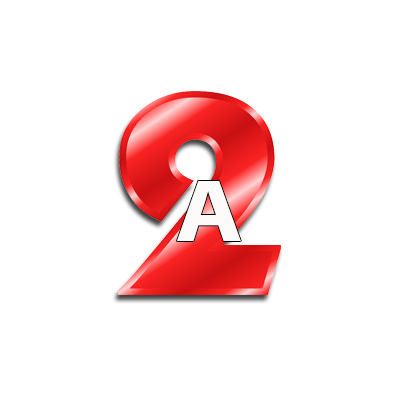
<style>
.page{position:relative;width:400px;height:400px;background:#ffffff}
.page>*{position:absolute;margin:0}
.t1{font:89.2px "MyriadPro-Bold";color:#fdfafa;scale:1.16 1}
</style>
<div class="page">
<p class="t1" style="left:177px;top:181px;width:64px;height:60px">A</p>
</div>
